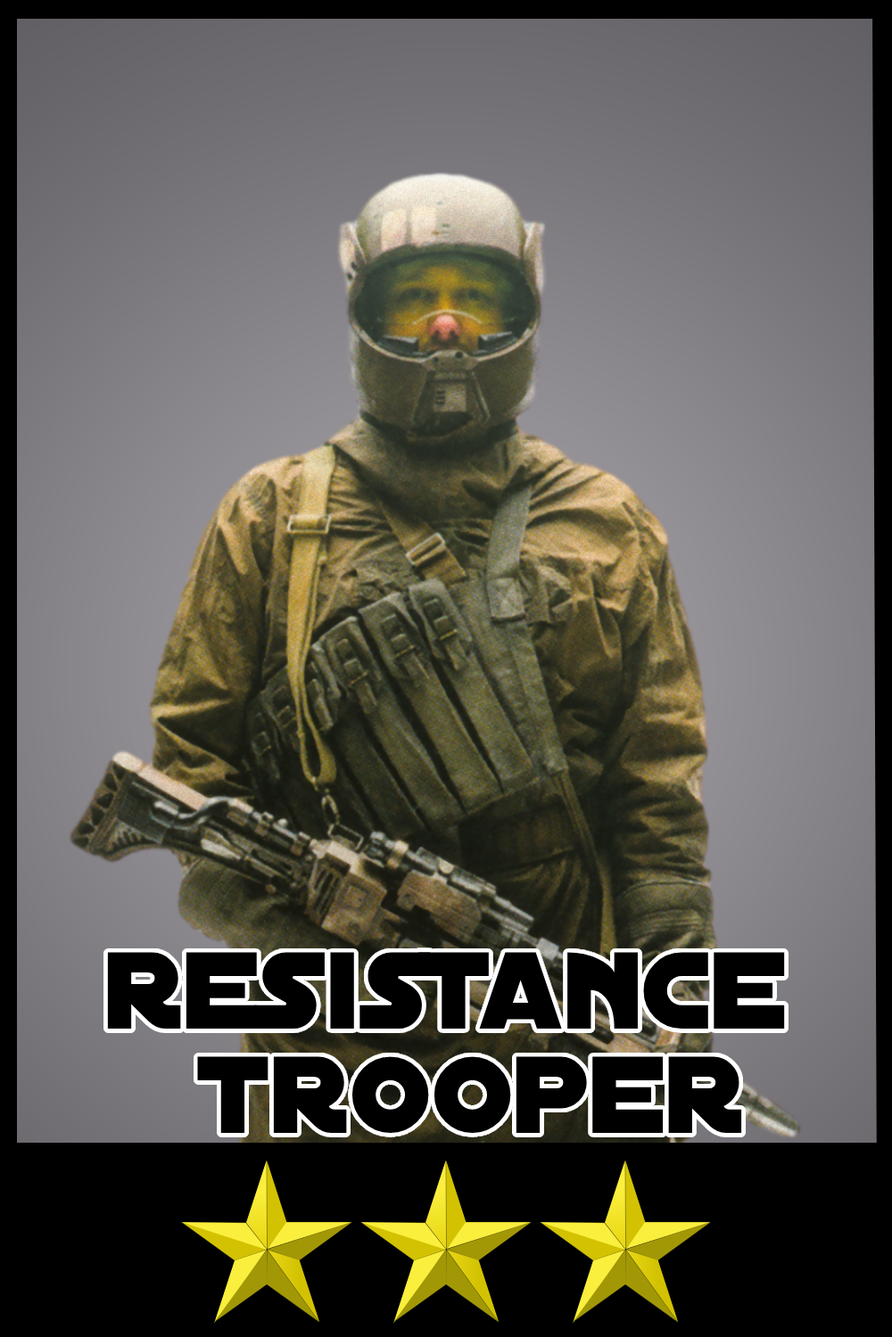
<style>
.page{position:relative;width:892px;height:1337px}
.page>*{position:absolute;margin:0}
.t1{font:117.1px/103.6px "DistantGalaxy";color:#000000}
</style>
<div class="page">
<p class="t1" style="left:107px;top:952px;width:678px;height:181px;text-align:center">resistance <br>trooper</p>
</div>
